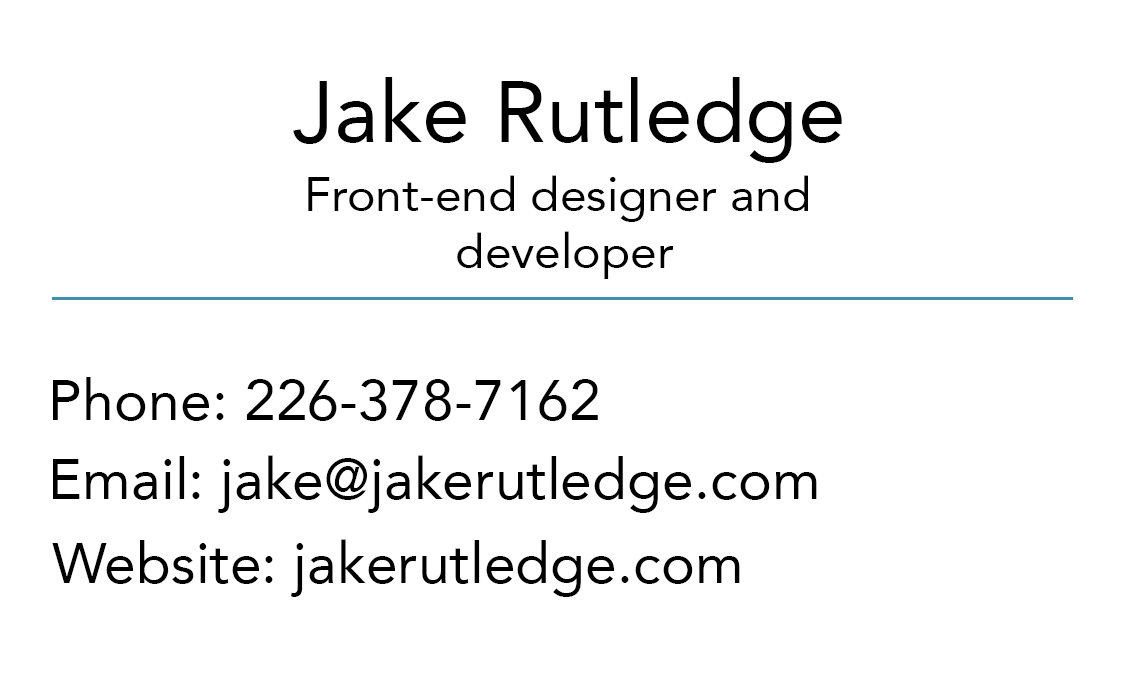
<style>
.page{position:relative;width:1125px;height:675px;background:#ffffff}
.page>*{position:absolute;margin:0}
.t1{font:86.2px "Avenir-Roman";color:#000000}
.t2{font:47.9px "Avenir-Roman";color:#000000}
.t3{font:13.8px "Avenir-Roman";color:#000000}
</style>
<div class="page">
<p class="t1" style="left:293px;top:77px;width:549px;height:86px">Jake Rutledge</p>
<p class="t2" style="left:308px;top:175px;width:500px;height:104px;text-align:center">Front-end designer and <br>developer</p>
<p class="t3" style="left:53px;top:377px;width:545px;height:44px;text-align:center">Phone: 226-378-7162</p>
<p class="t3" style="left:53px;top:455px;width:764px;height:58px;text-align:center">Email: jake@jakerutledge.com</p>
<p class="t3" style="left:52px;top:539px;width:688px;height:58px;text-align:center">Website: jakerutledge.com</p>
</div>
